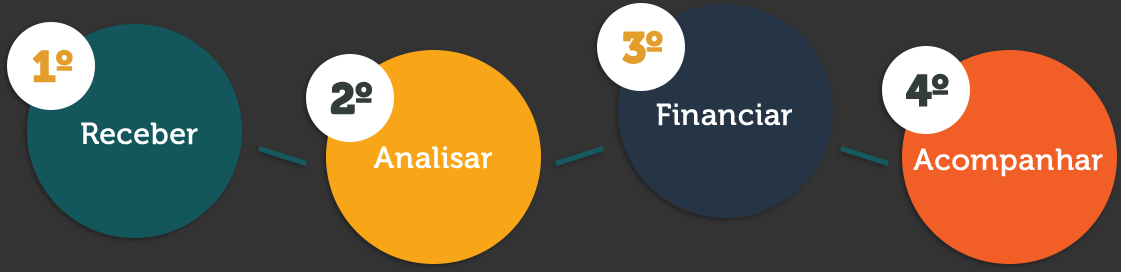
<style>
.page{position:relative;width:1121px;height:272px;background:#333333}
.page>*{position:absolute;margin:0}
.t1{font:44px "Museo900-Regular";letter-spacing:-0.075em;color:#e29d2a;font-weight:bold}
.t2{font:44px "Museo900-Regular";letter-spacing:-0.075em;color:#323d37;font-weight:bold}
.t3{font:30px "Museo500-Regular";color:#ffffff;font-weight:bold}
</style>
<div class="page">
<p class="t1" style="left:622px;top:30px;width:41px;height:34px">3º</p>
<p class="t1" style="left:32px;top:49px;width:41px;height:34px">1º</p>
<p class="t2" style="left:906px;top:73px;width:43px;height:34px">4º</p>
<p class="t2" style="left:330px;top:81px;width:42px;height:34px">2º</p>
<p class="t3" style="left:656px;top:103px;width:136px;height:23px">Financiar</p>
<p class="t3" style="left:81px;top:122px;width:117px;height:23px">Receber</p>
<p class="t3" style="left:374px;top:146px;width:118px;height:23px">Analisar</p>
<p class="t3" style="left:913px;top:148px;width:190px;height:29px">Acompanhar</p>
</div>
